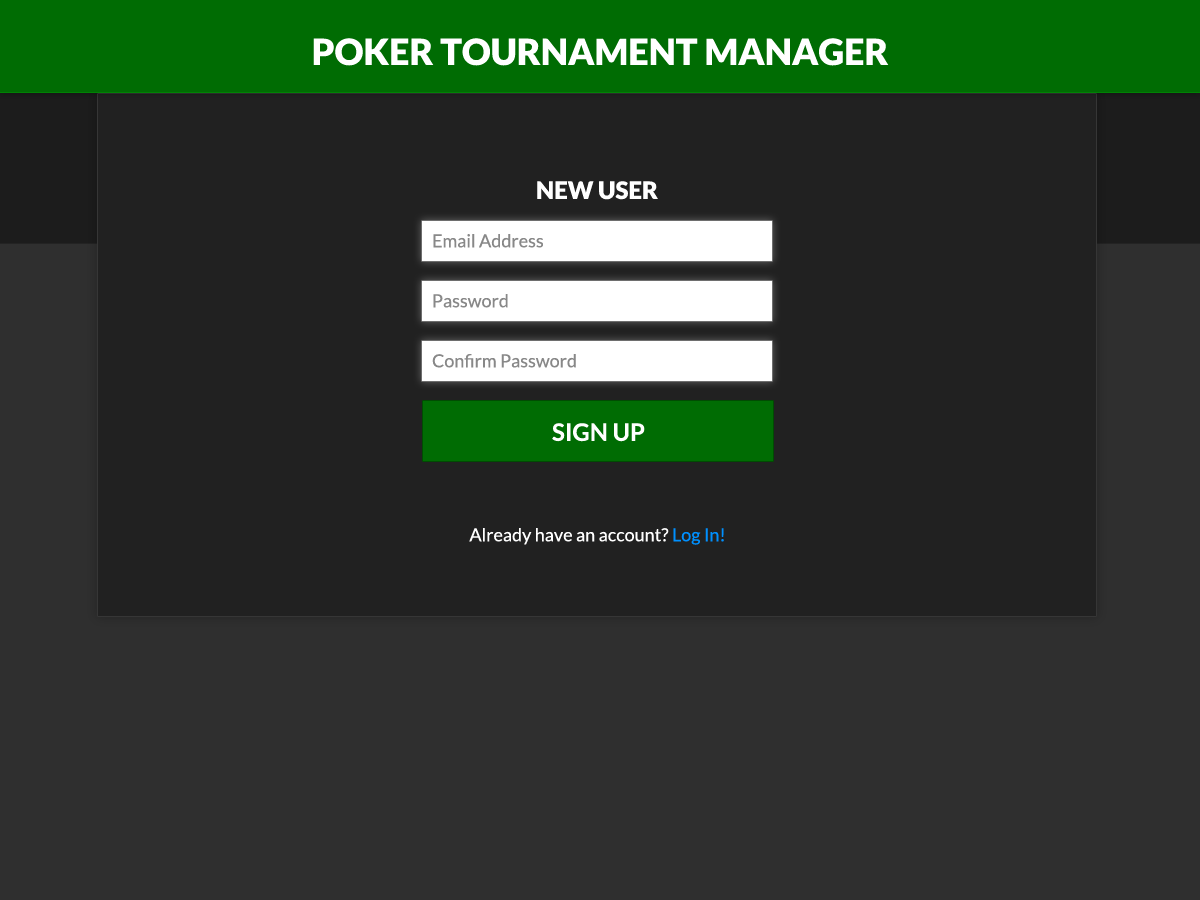
<style>
.page{position:relative;width:1200px;height:900px;background:#212121}
.page>*{position:absolute;margin:0}
.t1{font:36px "Lato-Black";color:#ffffff}
.t2{font:24px "Lato-Black";color:#ffffff}
.t3{font:18px "Lato-Regular";color:#888888}
.t4{font:24px "Lato-Bold";color:#ffffff}
.t5{font:18px "Lato-Regular";color:#ffffff}
.t6{font:18px "Lato-Regular";color:#0090ff}
</style>
<div class="page">
<p class="t1" style="left:313px;top:38px;width:576px;height:28px">POKER TOURNAMENT MANAGER</p>
<p class="t2" style="left:537px;top:181px;width:121px;height:19px">NEW USER</p>
<p class="t3" style="left:433px;top:234px;width:110px;height:14px">Email Address</p>
<p class="t3" style="left:433px;top:294px;width:75px;height:14px">Password</p>
<p class="t3" style="left:432px;top:354px;width:144px;height:14px">Confirm Password</p>
<p class="t4" style="left:552px;top:423px;width:93px;height:19px">SIGN UP</p>
<p class="t5" style="left:469px;top:528px;width:255px;height:17px">Already have an account? <span class="t6">Log In!</span></p>
</div>
